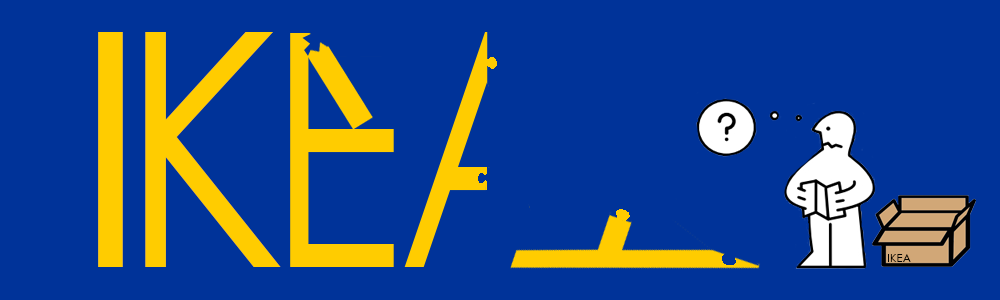
<style>
.page{position:relative;width:1000px;height:300px;background:#003399}
.page>*{position:absolute;margin:0}
.t1{font:326.8px "CenturyGothic";color:#ffcc00;scale:1.04 1}
.t2{font:327.1px "CenturyGothic";color:#ffcc00;scale:0.85 1}
.t3{font:11px "CenturyGothic";color:#010100}
</style>
<div class="page">
<p class="t1" style="left:98px;top:32px;width:25px;height:235px">I</p>
<p class="t2" style="left:145px;top:32px;width:136px;height:235px">K</p>
<p class="t3" style="left:888px;top:254px;width:23px;height:8px">IKEA</p>
</div>
